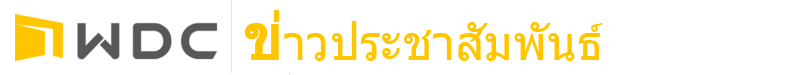
<style>
.page{position:relative;width:800px;height:75px;background:#ffffff}
.page>*{position:absolute;margin:0}
.t1{font:64px "Tahoma";color:#ffc600;font-weight:bold}
.t2{font:48px "Tahoma";color:#ffc600}
</style>
<div class="page">
<p class="t1" style="left:245px;top:10px;width:35px;height:50px">ข่</p>
<p class="t2" style="left:284px;top:21px;width:319px;height:40px">าวประชาสัมพันธ์</p>
</div>
